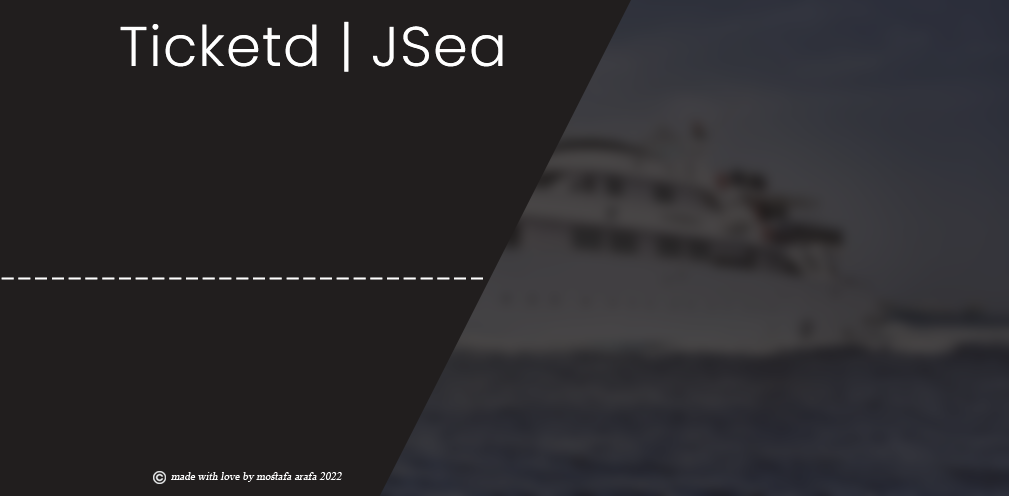
<style>
.page{position:relative;width:1009px;height:496px;background:#211e1e}
.page>*{position:absolute;margin:0}
.t1{font:55.9px "Poppins-Light";letter-spacing:0.02em;color:#ffffff}
.t2{font:31.1px "Poppins-Light";letter-spacing:0.02em;color:#ffffff}
.t3{font:10.5px "TimesNewRomanPSMT";letter-spacing:0.02em;color:#ffffff;font-style:italic}
</style>
<div class="page">
<p class="t1" style="left:120px;top:21px;width:383px;height:51px">Ticketd | JSea</p>
<p class="t2" style="left:1px;top:277px;width:482px;height:3px">-----------------------------</p>
<p class="t3" style="left:171px;top:472px;width:171px;height:10px">made with love by mostafa arafa 2022</p>
</div>
